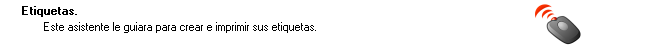
<style>
.page{position:relative;width:652px;height:52px;background:#ffffff}
.page>*{position:absolute;margin:0}
.t1{font:11.4px "MS Sans Serif";color:#000000;font-weight:bold}
.t2{font:11.4px "MS Sans Serif";color:#000000}
</style>
<div class="page">
<p class="t1" style="left:22px;top:6px;width:55px;height:11px">Etiquetas.</p>
<p class="t2" style="left:44px;top:22px;width:272px;height:11px">Este asistente le guiara para crear e imprimir sus etiquetas.</p>
</div>
